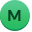
<style>
.page{position:relative;width:32px;height:32px;background:#ffffff}
.page>*{position:absolute;margin:0}
.t1{font:15px "Lato-Black";color:#084325}
</style>
<div class="page">
<p class="t1" style="left:8px;top:10px;width:13px;height:11px">M</p>
</div>
